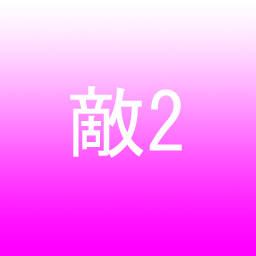
<style>
.page{position:relative;width:256px;height:256px}
.page>*{position:absolute;margin:0}
.t1{font:80px "MS-Gothic";color:#ffffff}
</style>
<div class="page">
<p class="t1" style="left:70px;top:86px;width:112px;height:72px">敵2</p>
</div>
